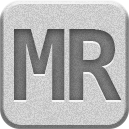
<style>
.page{position:relative;width:129px;height:129px}
.page>*{position:absolute;margin:0}
.t1{font:97.7px "Menlo-Bold";color:#6f6f6f}
</style>
<div class="page">
<p class="t1" style="left:14px;top:29px;width:108px;height:71px">MR</p>
</div>
